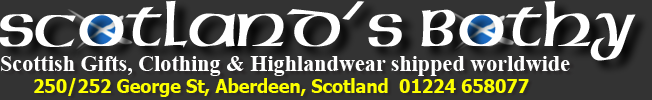
<style>
.page{position:relative;width:652px;height:100px;background:#333333}
.page>*{position:absolute;margin:0}
.t1{font:22.4px "TimesNewRomanPS-BoldMT";letter-spacing:-0.005em;color:#ffffff}
.t2{font:18.7px "Tahoma-Bold";letter-spacing:-0.01em;color:#fcff00;scale:0.97 1}
</style>
<div class="page">
<p class="t1" style="left:1px;top:56px;width:569px;height:20px">Scottish Gifts, Clothing &amp; Highlandwear shipped worldwide</p>
<p class="t2" style="left:34px;top:78px;width:495px;height:19px">250/252 George St, Aberdeen, Scotland  01224 658077</p>
</div>
